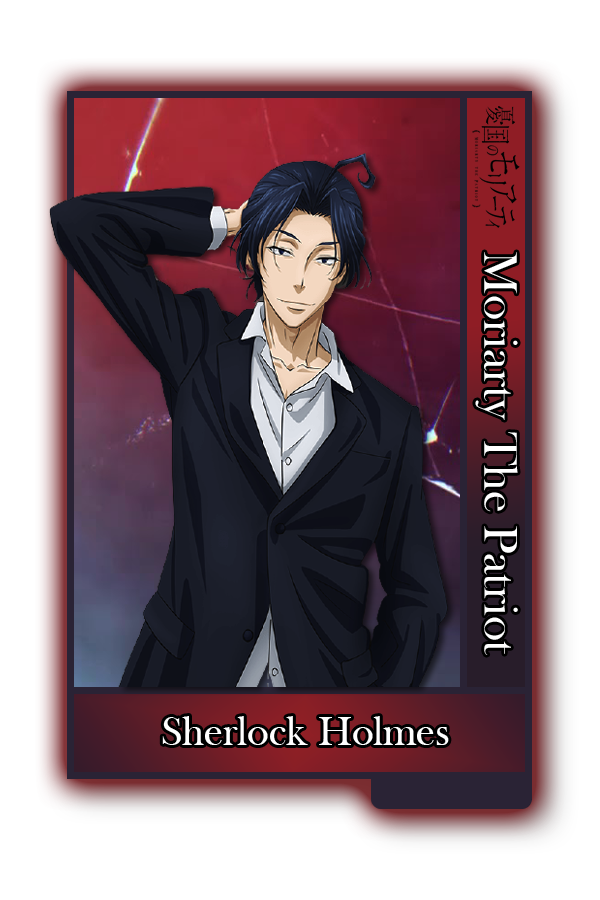
<style>
.page{position:relative;width:600px;height:900px;background:#ffffff}
.page>*{position:absolute;margin:0}
.t1{font:48.8px "BaskOldFace";color:#ffffff}
.t2{font:41.7px "BaskOldFace";color:#ffffff}
</style>
<div class="page">
<p class="t1" style="left:475px;top:252px;width:43px;height:403px;rotate:90deg">Moriarty The Patriot</p>
<p class="t2" style="left:162px;top:716px;width:287px;height:29px">Sherlock Holmes</p>
</div>
